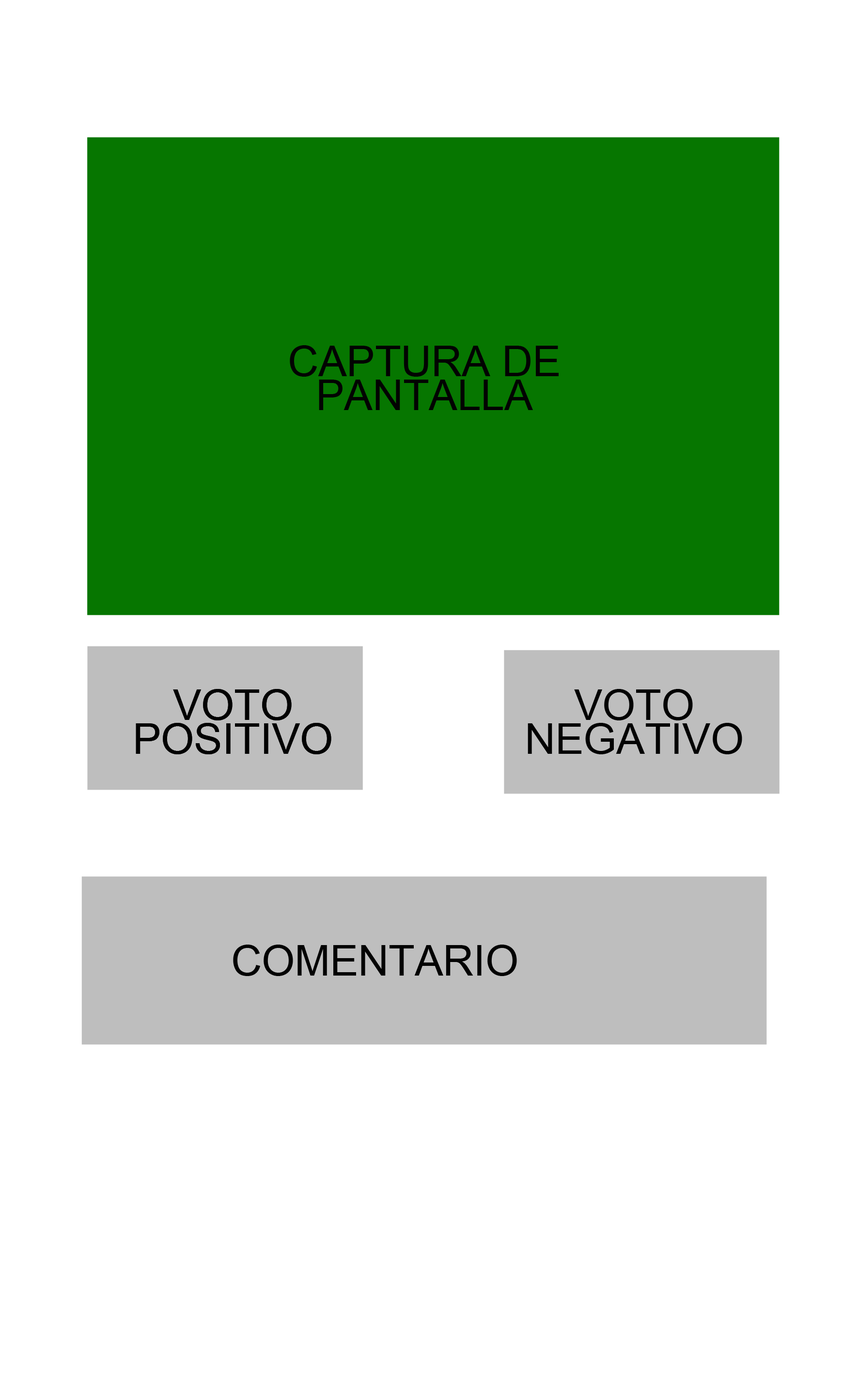
<style>
.page{position:relative;width:858px;height:1390px;background:#ffffff}
.page>*{position:absolute;margin:0}
.t1{font:42.4px "ArialMT";color:#020202}
</style>
<div class="page">
<p class="t1" style="left:290px;top:345px;width:268px;height:65px">CAPTURA DE PANTALLA</p>
<p class="t1" style="left:136px;top:689px;width:195px;height:65px;text-align:center">VOTO<br>POSITIVO</p>
<p class="t1" style="left:136px;top:689px;width:195px;height:65px;text-align:center">VOTO<br>POSITIVO</p>
<p class="t1" style="left:527px;top:689px;width:215px;height:65px;text-align:center">VOTO<br>NEGATIVO</p>
<p class="t1" style="left:233px;top:945px;width:284px;height:31px">COMENTARIO</p>
</div>
